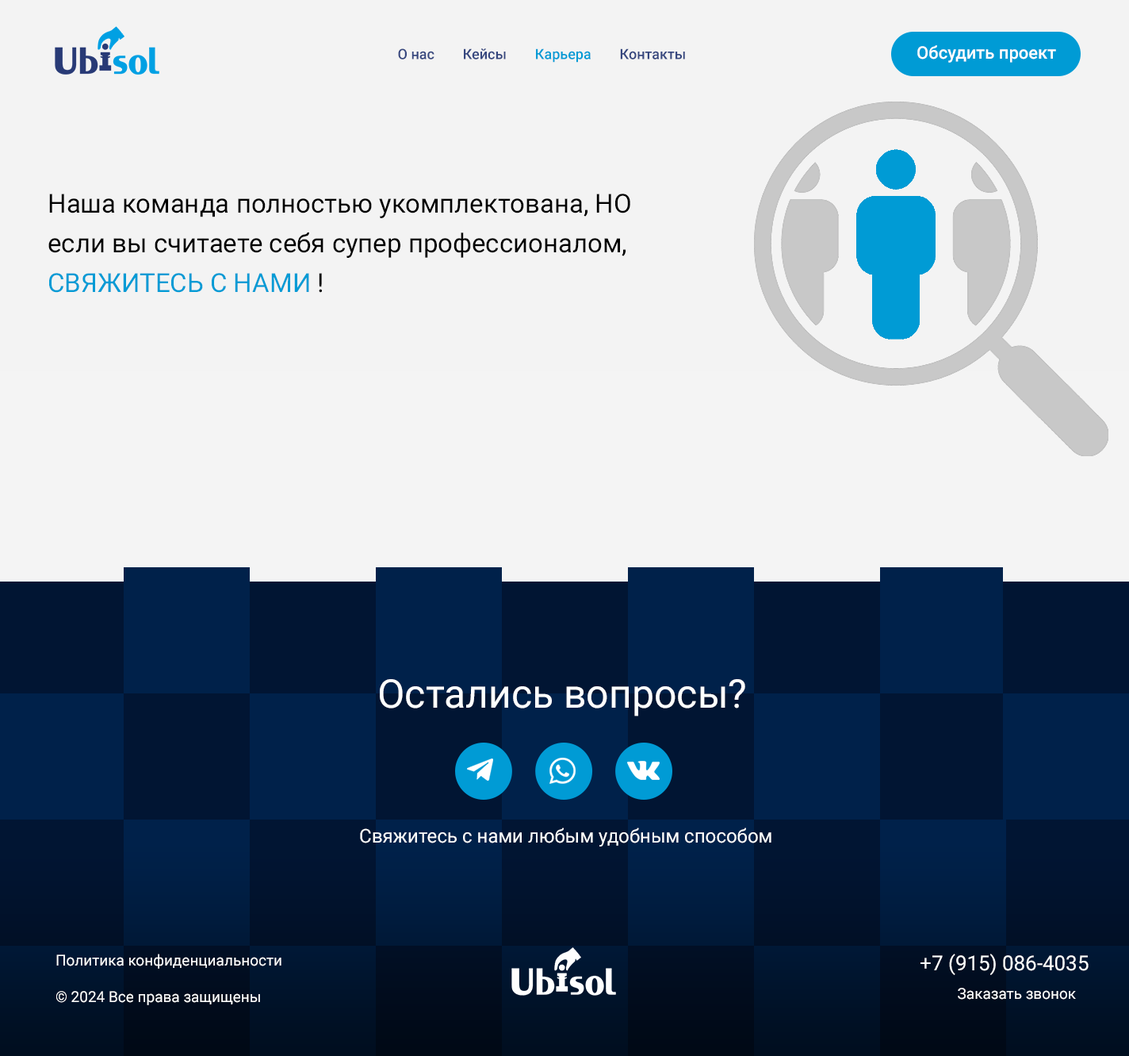
<style>
.page{position:relative;width:1129px;height:1056px;background:#f3f3f3}
.page>*{position:absolute;margin:0}
.t1{font:14.3px "Roboto-Medium";color:#36477f}
.t2{font:14.3px "Roboto-Medium";color:#009bd5}
.t3{font:17.5px "Roboto-Medium";color:#ffffff}
.t4{font:26.2px/39.7px "Roboto-Regular";color:#000000}
.t5{font:26.2px/39.7px "Roboto-Regular";color:#000000;text-transform:uppercase}
.t6{font:26.2px/39.7px "Roboto-Regular";color:#009bd5;text-transform:uppercase}
.t7{font:39.7px "Roboto-Regular";color:#ffffff}
.t8{font:19px "Roboto-Regular";color:#ffffff}
.t9{font:15.1px "Roboto-Regular";color:#ffffff}
.t10{font:20.6px "Roboto-Regular";color:#ffffff;text-transform:uppercase}
</style>
<div class="page">
<p class="t1" style="left:398px;top:48px;width:287px;height:15px">О нас        Кейсы        <span class="t2">Карьера</span>        Контакты</p>
<p class="t3" style="left:918px;top:45px;width:139px;height:18px">Обсудить проект</p>
<p class="t4" style="left:48px;top:194px;width:583px;height:99px">Наша команда полностью укомплектована, <span class="t5">но</span> если вы считаете себя супер профессионалом,<br><span class="t6">свяжитесь с нами</span> !</p>
<p class="t7" style="left:380px;top:679px;width:366px;height:37px">Остались вопросы?</p>
<p class="t8" style="left:360px;top:827px;width:412px;height:19px">Cвяжитесь с нами любым удобным способом</p>
<p class="t9" style="left:56px;top:953px;width:226px;height:52px">Политика конфиденциальности<br><br>© 2024 Все права защищены</p>
<p class="t10" style="left:921px;top:953px;width:168px;height:22px">+7 (915) 086-4035</p>
<p class="t9" style="left:958px;top:988px;width:118px;height:11px">Заказать звонок</p>
</div>
